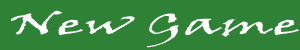
<style>
.page{position:relative;width:300px;height:50px;background:#2f8136}
.page>*{position:absolute;margin:0}
.t1{font:30px "VinerHandITC";color:#ffffff;scale:2 1}
</style>
<div class="page">
<p class="t1" style="left:11px;top:10px;width:288px;height:38px">New Game</p>
</div>
